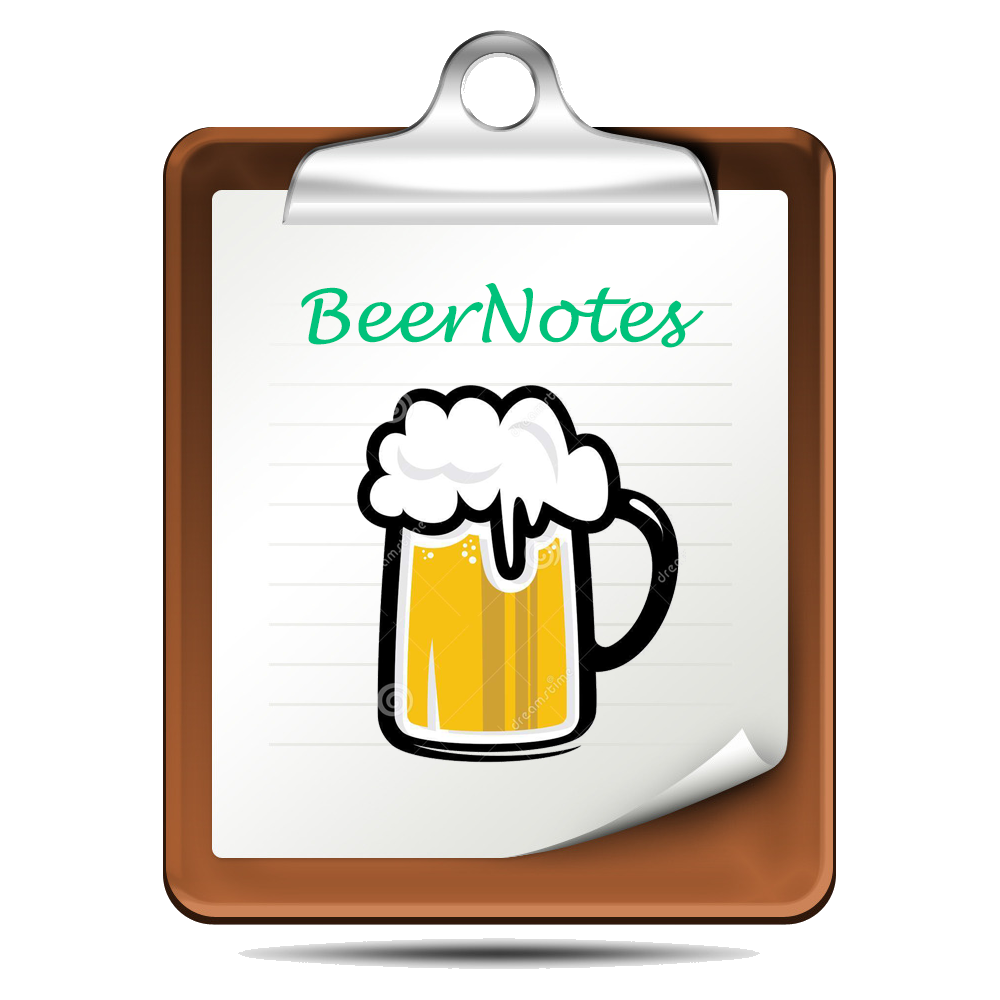
<style>
.page{position:relative;width:1000px;height:1000px;background:#ffffff}
.page>*{position:absolute;margin:0}
.t1{font:72px "LucidaHandwriting-Italic";color:#00c27b}
</style>
<div class="page">
<p class="t1" style="left:301px;top:283px;width:403px;height:65px">BeerNotes</p>
</div>
